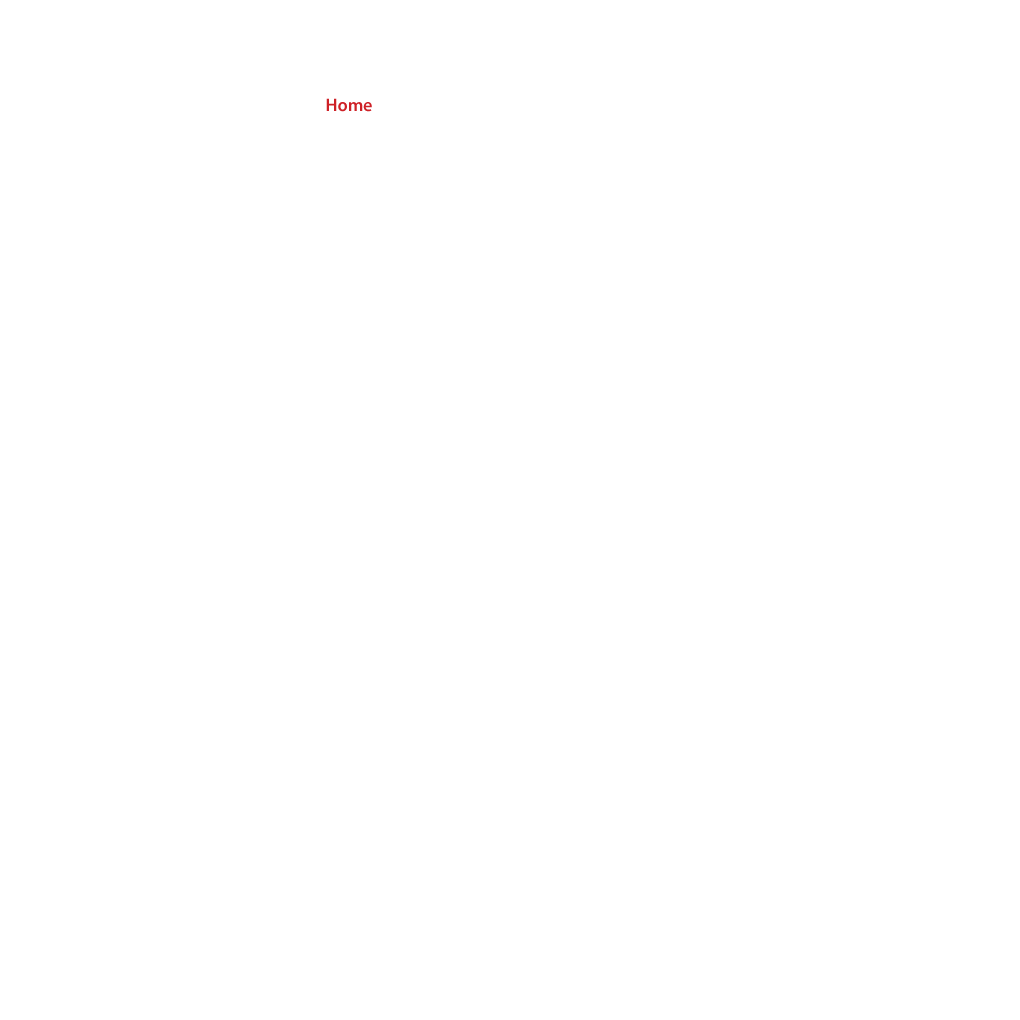
<style>
.page{position:relative;width:1020px;height:1020px;background:#ffffff}
.page>*{position:absolute;margin:0}
.t1{font:18px "MyriadPro-Semibold";color:#ce2127}
</style>
<div class="page">
<p class="t1" style="left:326px;top:98px;width:46px;height:14px">Home</p>
</div>
